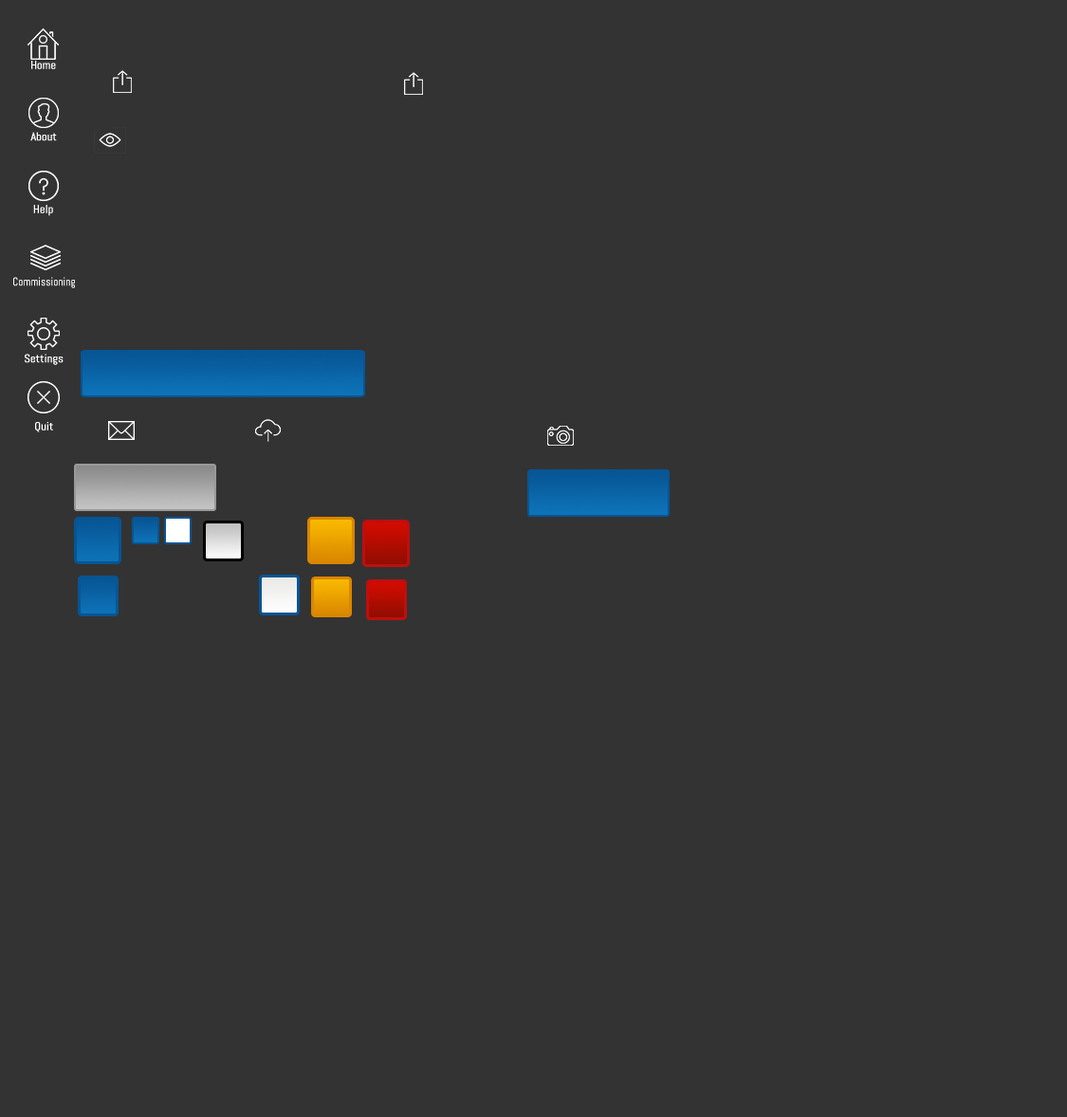
<style>
.page{position:relative;width:1067px;height:1117px;background:#333333}
.page>*{position:absolute;margin:0}
.t1{font:11.4px "Abel-Regular";color:#ffffff;font-weight:bold}
.t2{font:11.4px "Abel-Regular";color:#ffffff;font-weight:bold;scale:0.9 1}
</style>
<div class="page">
<p class="t1" style="left:31px;top:61px;width:25px;height:8px">Home</p>
<p class="t1" style="left:30px;top:132px;width:27px;height:9px">About</p>
<p class="t1" style="left:33px;top:205px;width:20px;height:11px">Help</p>
<p class="t2" style="left:13px;top:277px;width:62px;height:11px">Commissioning</p>
<p class="t1" style="left:25px;top:354px;width:39px;height:11px">Settings</p>
<p class="t1" style="left:35px;top:422px;width:18px;height:11px">Quit</p>
</div>
